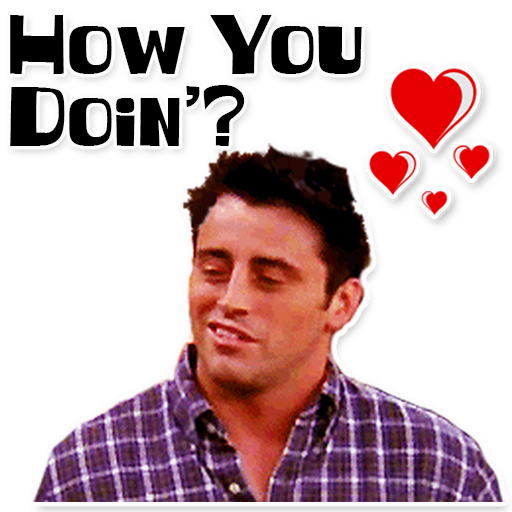
<style>
.page{position:relative;width:512px;height:512px;background:#ffffff}
.page>*{position:absolute;margin:0}
.t1{font:79.2px/72px "Witless";color:#000000}
</style>
<div class="page">
<p class="t1" style="left:10px;top:15px;width:352px;height:131px">How You<br>Doin’?</p>
</div>
